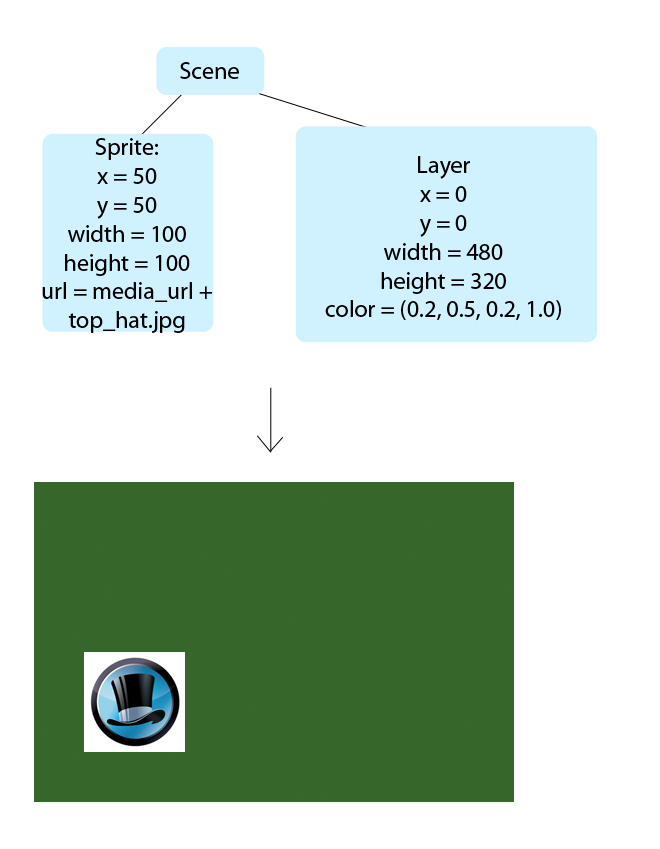
<style>
.page{position:relative;width:660px;height:849px;background:#ffffff}
.page>*{position:absolute;margin:0}
.t1{font:24px "MyriadPro-Regular";color:#000000}
</style>
<div class="page">
<p class="t1" style="left:180px;top:62px;width:59px;height:17px">Scene</p>
<p class="t1" style="left:42px;top:138px;width:171px;height:195px;text-align:center">Sprite:<br>x = 50<br>y = 50<br>width = 100<br>height = 100<br>url = media_url + top_hat.jpg</p>
<p class="t1" style="left:325px;top:156px;width:236px;height:165px;text-align:center">Layer<br>x = 0<br>y = 0<br>width = 480<br>height = 320<br>color = (0.2, 0.5, 0.2, 1.0)</p>
</div>
